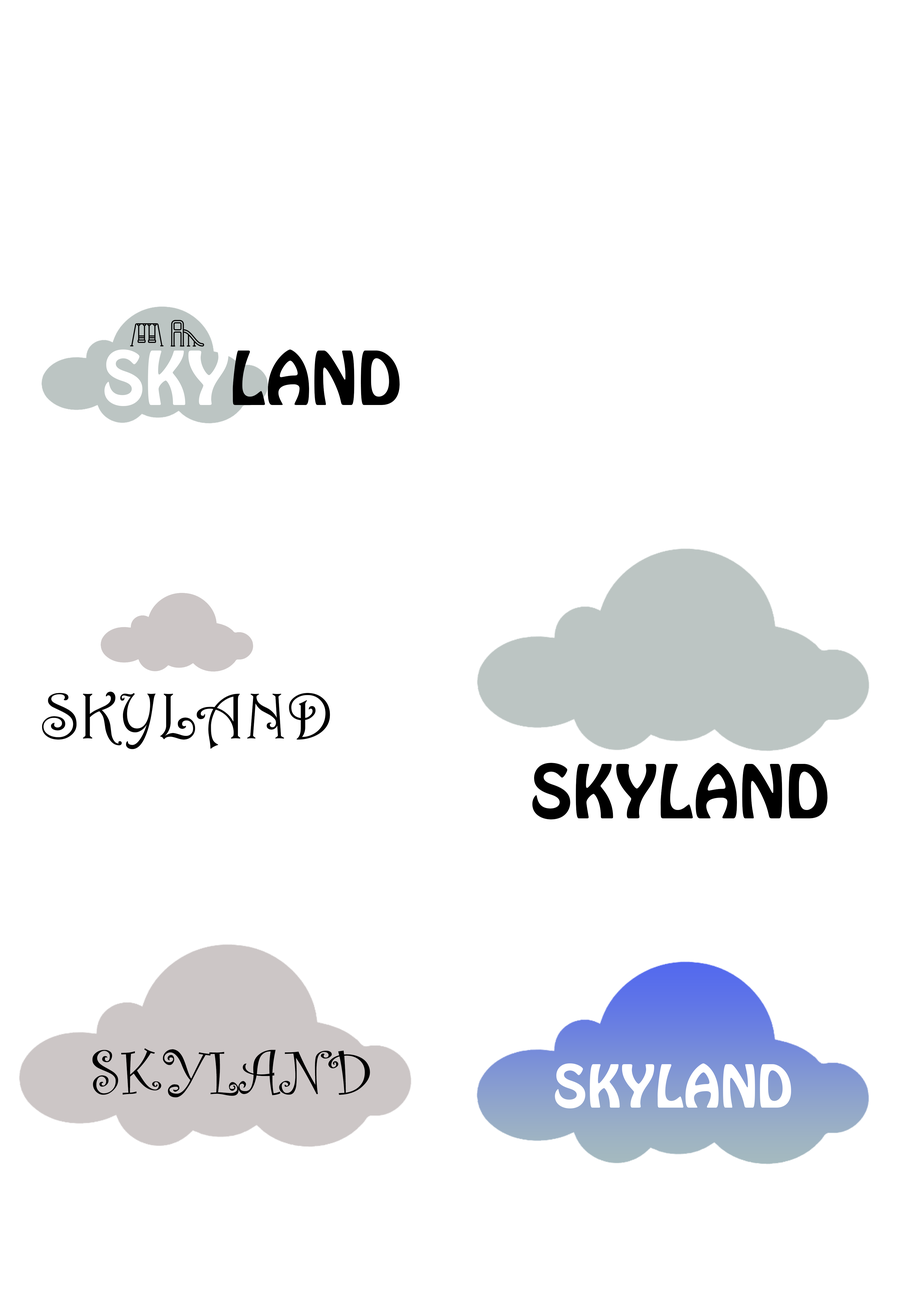
<style>
.page{position:relative;width:918px;height:1299px;background:#ffffff}
.page>*{position:absolute;margin:0}
.t1{font:65.4px "HoboStd";color:#000000}
.t2{font:65.4px "HoboStd";color:#ffffff}
.t3{font:65.4px "Harrington";color:#000000}
.t4{font:65.4px "CurlzMT";color:#000000}
.t5{font:52.3px "HoboStd";color:#ffffff}
</style>
<div class="page">
<p class="t1" style="left:104px;top:349px;width:296px;height:57px"><span class="t2">SKY</span>LAND</p>
<p class="t3" style="left:42px;top:691px;width:288px;height:58px">SKYLAND</p>
<p class="t1" style="left:532px;top:763px;width:296px;height:56px">SKYLAND</p>
<p class="t4" style="left:92px;top:1048px;width:278px;height:49px">SKYLAND</p>
<p class="t5" style="left:555px;top:1063px;width:236px;height:45px">SKYLAND</p>
</div>
